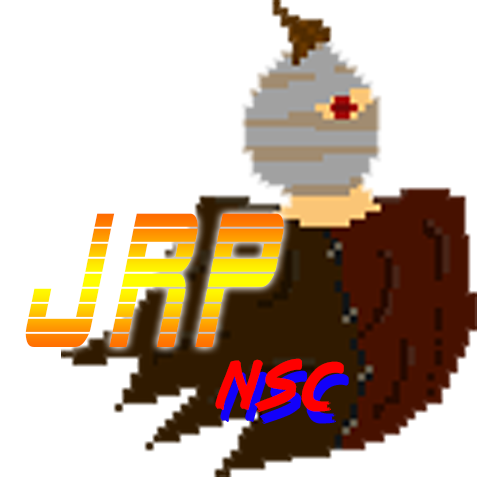
<style>
.page{position:relative;width:477px;height:477px;background:#ffffff}
.page>*{position:absolute;margin:0}
.t1{font:187.7px "AlienEncountersBoldItalic";letter-spacing:0.16em;scale:0.56 1}
.t2{font:60.2px "lazer84";letter-spacing:0.24em;color:#ff0000;scale:0.81 1}
</style>
<div class="page">
<p class="t1" style="left:25px;top:213px;width:259px;height:134px">JRP</p>
<p class="t2" style="left:215px;top:358px;width:129px;height:54px">NSC</p>
</div>
